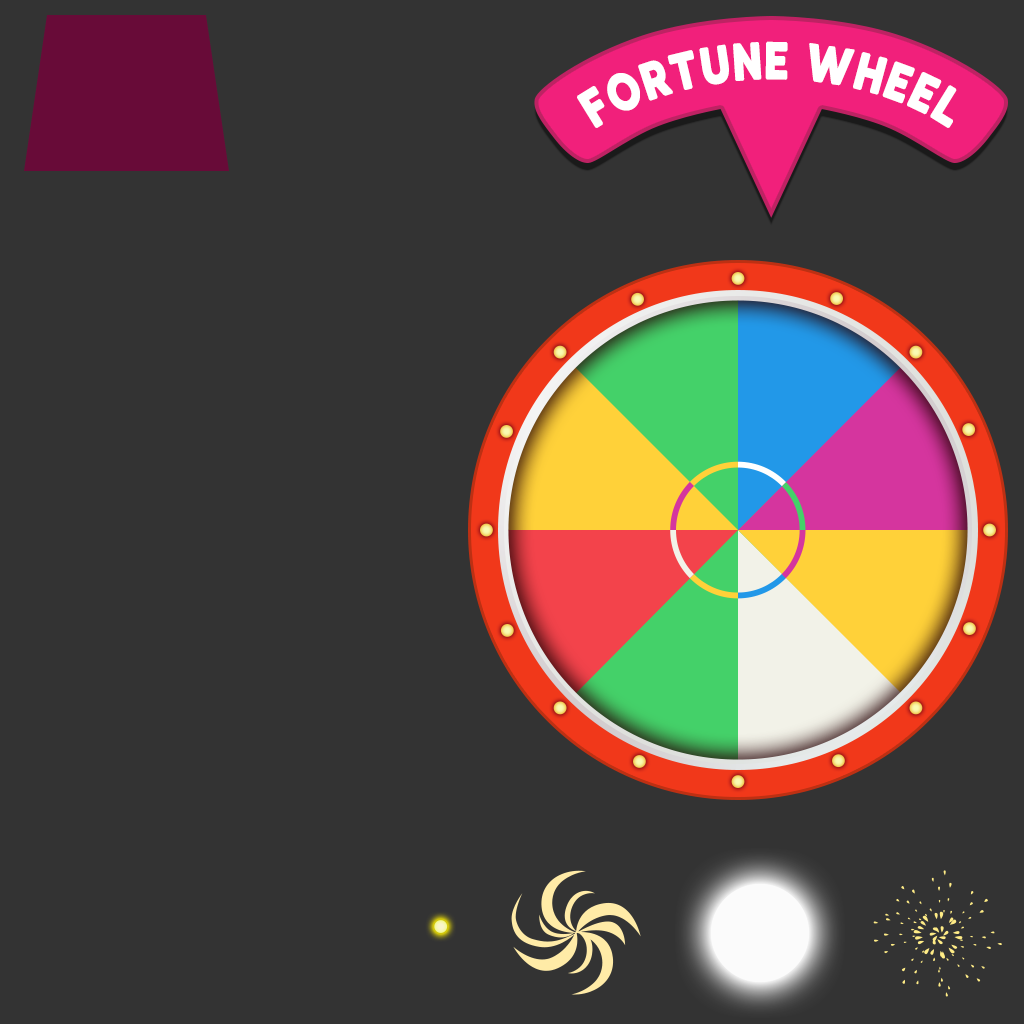
<style>
.page{position:relative;width:1024px;height:1024px;background:#333333}
.page>*{position:absolute;margin:0}
.t1{font:53.4px "MADEWaffleSoft";color:#ffffff;scale:0.78 1}
</style>
<div class="page">
<p class="t1" style="left:577px;top:41px;width:380px;height:87px">FORTUNE WHEEL</p>
</div>
